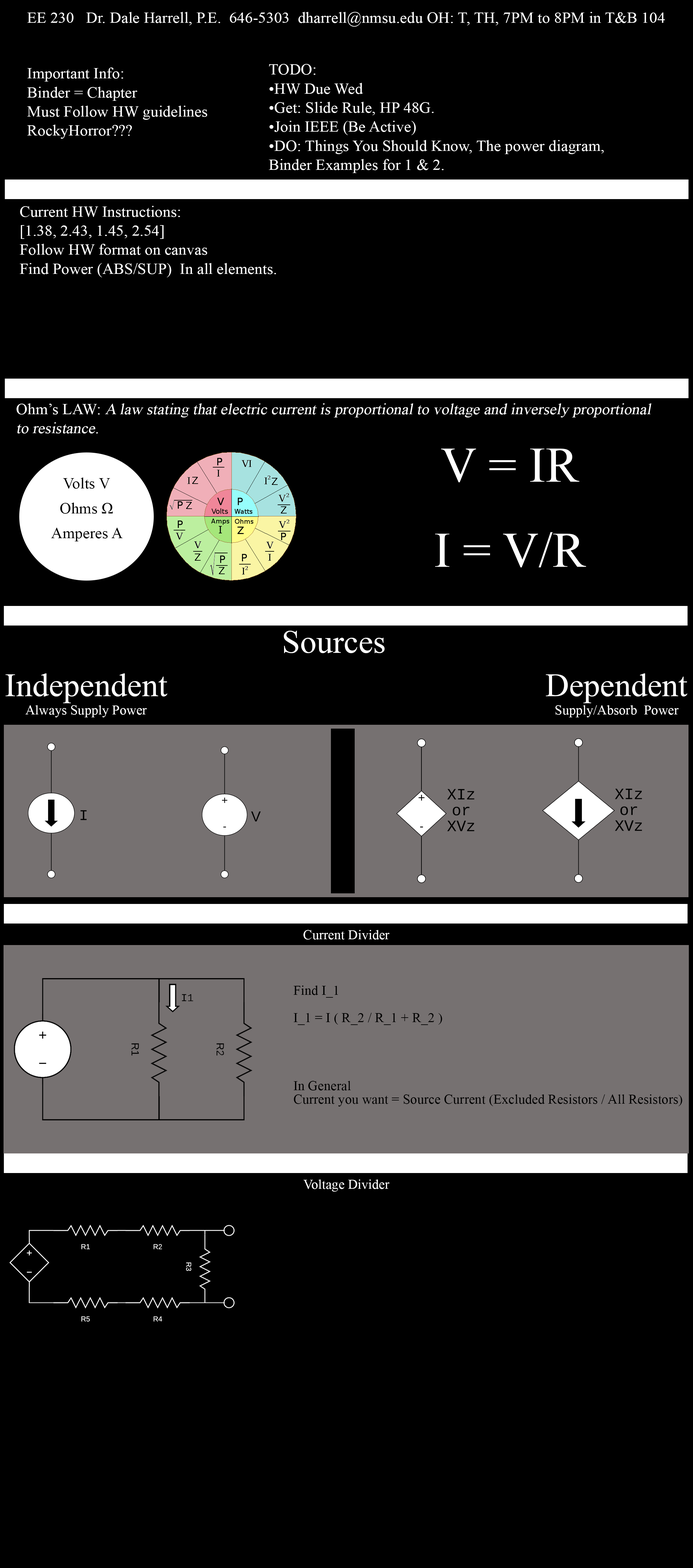
<style>
.page{position:relative;width:693px;height:1568px;background:#000000}
.page>*{position:absolute;margin:0}
.t1{font:15.9px "TimesNewRomanPSMT";color:#ffffff}
.t2{font:15.9px "TimesNewRomanPSMT";color:#ffffff;font-style:italic}
.t3{font:49.8px/85px "TimesNewRomanPSMT";color:#ffffff}
.t4{font:15.9px/24.9px "TimesNewRomanPSMT";color:#000000}
.t5{font:32.9px "TimesNewRomanPSMT";color:#ffffff}
.t6{font:13.6px "TimesNewRomanPSMT";color:#ffffff}
.t7{font:13.6px/13.6px "TimesNewRomanPSMT";color:#000000}
.t8{font:13.6px/85px "TimesNewRomanPSMT";color:#000000}
</style>
<div class="page">
<p class="t1" style="left:27px;top:12px;width:638px;height:15px">EE 230   Dr. Dale Harrell, P.E.  646‐5303  dharrell@nmsu.edu OH: T, TH, 7PM to 8PM in T&amp;B 104</p>
<p class="t1" style="left:269px;top:64px;width:335px;height:109px">TODO: <br>•HW Due Wed <br>•Get: Slide Rule, HP 48G.<br>•Join IEEE (Be Active)<br>•DO: Things You Should Know, The power diagram, <br>Binder Examples for 1 &amp; 2.</p>
<p class="t1" style="left:27px;top:67px;width:180px;height:72px">Important Info:<br>Binder = Chapter<br>Must Follow HW guidelines<br>RockyHorror???</p>
<p class="t1" style="left:20px;top:206px;width:256px;height:71px">Current HW Instructions:<br>[1.38, 2.43, 1.45, 2.54]<br>Follow HW format on canvas <br>Find Power (ABS/SUP)  In all elements.</p>
<p class="t2" style="left:16px;top:403px;width:636px;height:31px"><span class="t1">Ohm’s LAW: </span>A law stating that electric current is proportional to voltage and inversely proportional <br>to resistance.</p>
<p class="t3" style="left:435px;top:449px;width:151px;height:118px;text-align:center">V = IR<br>I = V/R</p>
<p class="t4" style="left:51px;top:477px;width:72px;height:64px;text-align:center">Volts V<br>Ohms Ω<br>Amperes A</p>
<p class="t5" style="left:284px;top:631px;width:101px;height:22px">Sources</p>
<p class="t5" style="left:5px;top:673px;width:163px;height:30px">Independent</p>
<p class="t5" style="left:546px;top:673px;width:142px;height:30px">Dependent</p>
<p class="t6" style="left:25px;top:705px;width:122px;height:12px">Always Supply Power</p>
<p class="t6" style="left:556px;top:705px;width:123px;height:12px">Supply/Absorb  Power</p>
<p class="t6" style="left:303px;top:930px;width:87px;height:10px">Current Divider</p>
<p class="t7" style="left:293px;top:985px;width:390px;height:122px"><span class="t8">Find I_1 </span><br><br>I_1 = I ( R_2 / R_1 + R_2 )<br><br><br><br><br>In General<br>Current you want = Source Current (Excluded Resistors / All Resistors)</p>
<p class="t6" style="left:303px;top:1179px;width:87px;height:13px">Voltage Divider</p>
</div>
